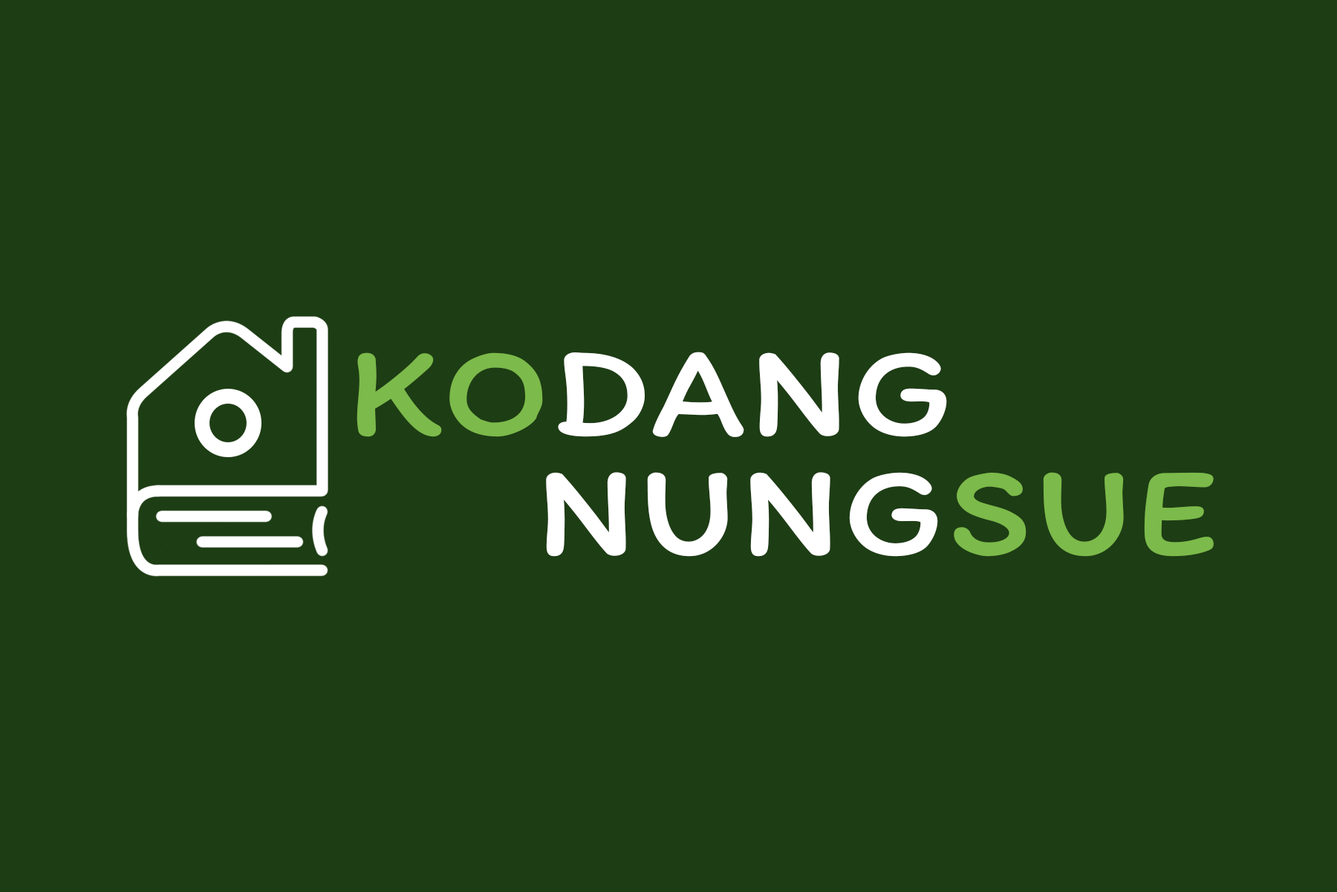
<style>
.page{position:relative;width:1337px;height:892px;background:#1d3d14}
.page>*{position:absolute;margin:0}
.t1{font:128.9px "Itim-Regular";color:#ffffff;font-weight:bold;scale:1.14 1}
.t2{font:128.9px "Itim-Regular";color:#7cba4b;font-weight:bold;scale:1.14 1}
</style>
<div class="page">
<p class="t1" style="left:357px;top:351px;width:590px;height:86px"><span class="t2">KO</span>DANG</p>
<p class="t1" style="left:546px;top:472px;width:668px;height:85px">NUNG<span class="t2">SUE</span></p>
</div>
